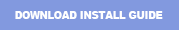
<style>
.page{position:relative;width:179px;height:30px;background:#8299df}
.page>*{position:absolute;margin:0}
.t1{font:18.2px "Arial-Black";color:#ffffff;scale:0.9 1}
</style>
<div class="page">
<p class="t1" style="left:15px;top:11px;width:148px;height:8px">DOWNLOAD INSTALL GUIDE</p>
</div>
